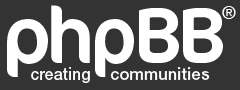
<style>
.page{position:relative;width:240px;height:90px;background:#333333}
.page>*{position:absolute;margin:0}
.t1{font:80.1px "Cocon-Regular";letter-spacing:-0.065em;color:#ffffff}
.t2{font:80.1px "Cocon-Regular";letter-spacing:-0.04em;color:#ffffff;scale:0.95 1}
.t3{font:80.1px "Cocon-Regular";letter-spacing:-0.05em;color:#ffffff}
.t4{font:80.1px "Cocon-Regular";letter-spacing:-0.045em;color:#ffffff}
.t5{font:18.1px "HelveticaNeue-Medium";letter-spacing:0.02em;color:#ffffff}
.t6{font:17.3px "HelveticaNeueLTStd-Md";letter-spacing:0.02em;color:#ffffff;scale:0.9 1}
.t7{font:17.3px "HelveticaNeueLTStd-Md";letter-spacing:0.02em;color:#ffffff;scale:0.94 1}
</style>
<div class="page">
<p class="t1" style="left:7px;top:5px;width:216px;height:72px">ph<span class="t2">p</span><span class="t3">B</span><span class="t4">B</span></p>
<p class="t5" style="left:222px;top:6px;width:14px;height:13px">®</p>
<p class="t6" style="left:31px;top:67px;width:59px;height:16px">creating</p>
<p class="t7" style="left:110px;top:67px;width:100px;height:13px">communities</p>
</div>
